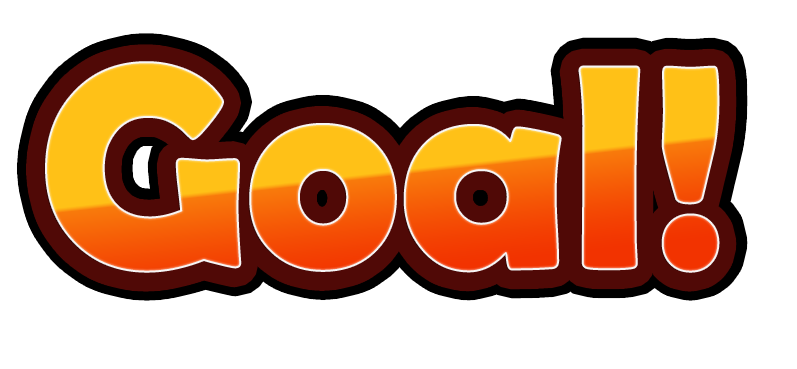
<style>
.page{position:relative;width:797px;height:369px;background:#ffffff}
.page>*{position:absolute;margin:0}
.t1{font:290.7px "BerlinSansFBDemi-Bold"}
</style>
<div class="page">
<p class="t1" style="left:47px;top:63px;width:671px;height:208px">Goal!</p>
</div>
